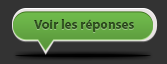
<style>
.page{position:relative;width:167px;height:64px;background:#333333}
.page>*{position:absolute;margin:0}
.t1{font:13.3px "MyriadPro-Bold";color:#335622}
</style>
<div class="page">
<p class="t1" style="left:34px;top:19px;width:100px;height:13px">Voir les réponses</p>
</div>
